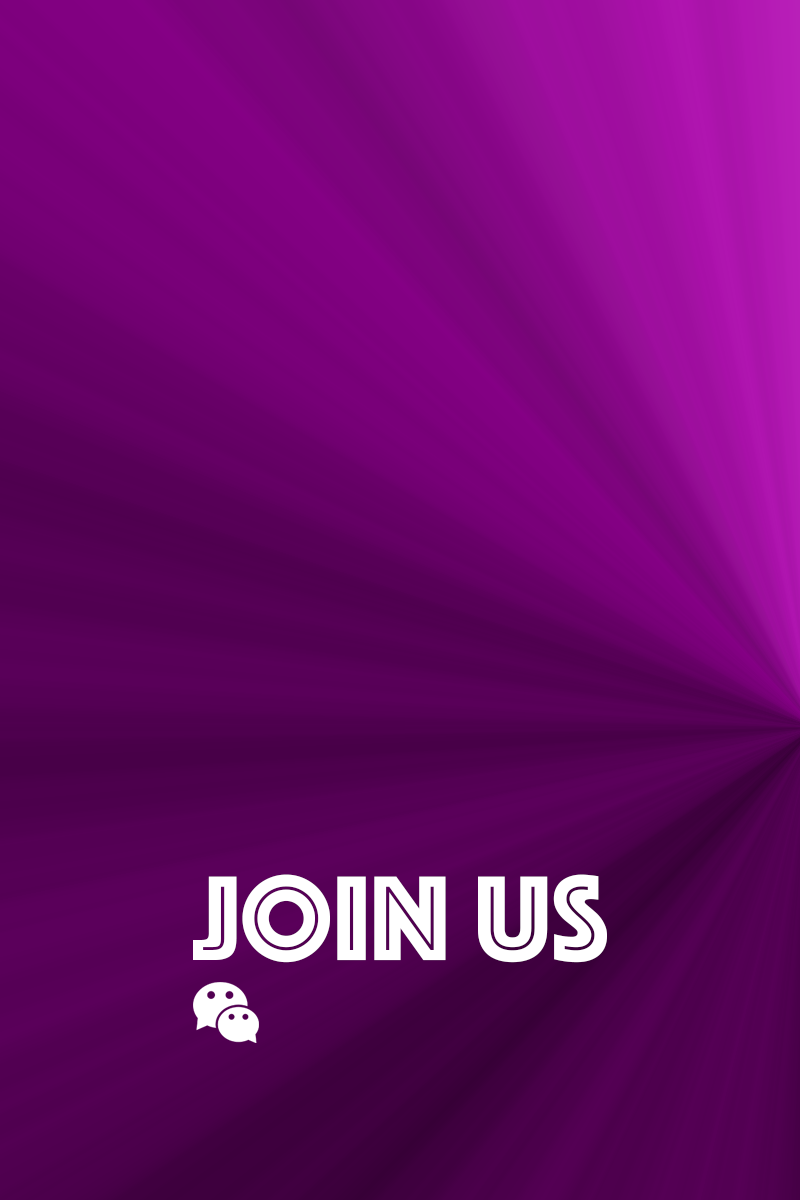
<style>
.page{position:relative;width:800px;height:1200px}
.page>*{position:absolute;margin:0}
.t1{font:125px "Phosphate-Inline";color:#ffffff}
</style>
<div class="page">
<p class="t1" style="left:193px;top:874px;width:414px;height:89px">Join Us</p>
</div>
